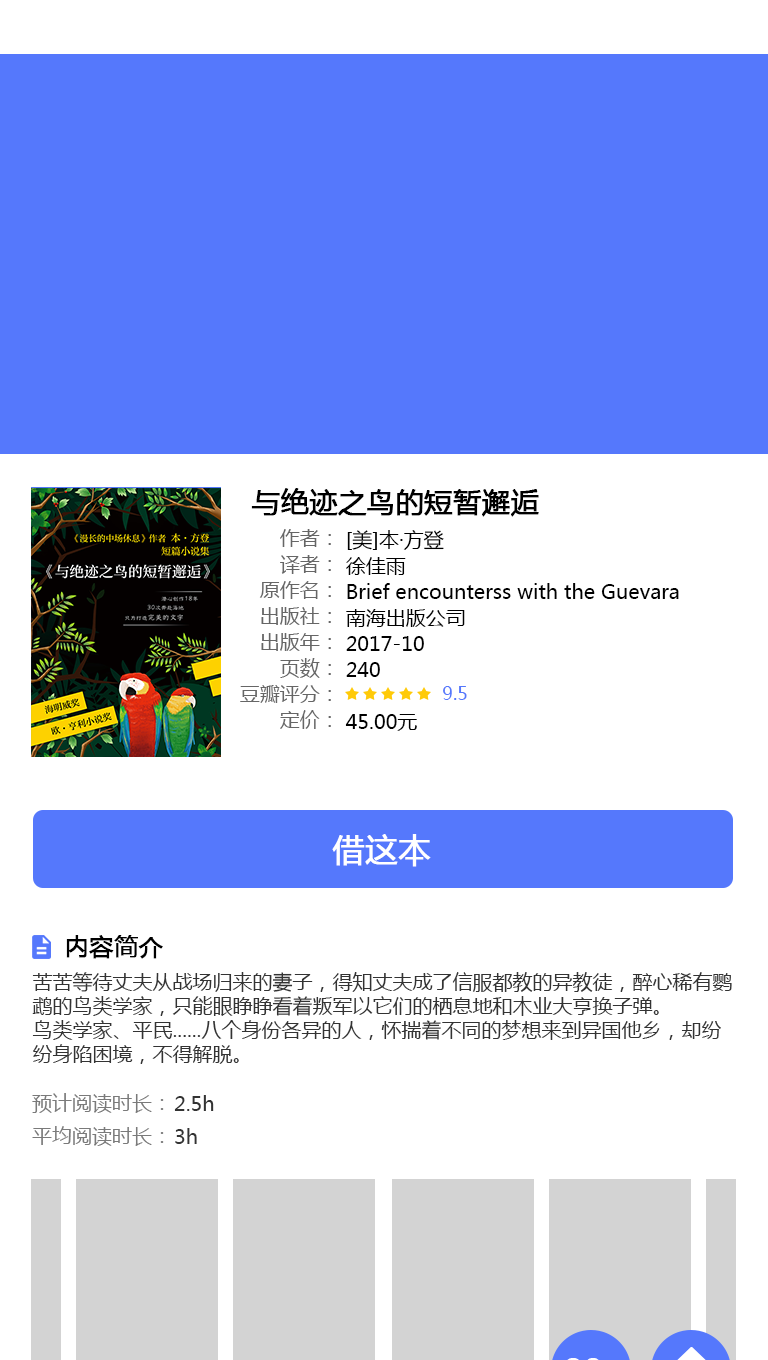
<style>
.page{position:relative;width:768px;height:1360px;background:#ffffff}
.page>*{position:absolute;margin:0}
.t1{font:28px "MicrosoftYaHei";color:#000000;font-weight:bold}
.t2{font:20px/26px "MicrosoftYaHei";color:#666666}
.t3{font:20px/26px "MicrosoftYaHei";color:#000000}
.t4{font:18px "MicrosoftYaHei";color:#5578fc}
.t5{font:32px "MicrosoftYaHei";color:#ffffff;font-weight:bold}
.t6{font:24px "MicrosoftYaHei";color:#000000;font-weight:bold}
.t7{font:20px/24px "MicrosoftYaHei";color:#333333}
.t8{font:20px "MicrosoftYaHei";color:#7a7a7a}
.t9{font:20px "MicrosoftYaHei";color:#333333}
</style>
<div class="page">
<p class="t1" style="left:251px;top:488px;width:288px;height:29px">与绝迹之鸟的短暂邂逅</p>
<p class="t2" style="left:240px;top:529px;width:91px;height:200px;text-align:right">作者：<br>译者：<br>原作名：<br>出版社：<br>出版年：<br>页数：<br>豆瓣评分：<br>定价：</p>
<p class="t3" style="left:345px;top:530px;width:334px;height:201px">[美]本·方登<br>徐佳雨<br>Brief encounterss with the Guevara <br>南海出版公司<br>2017-10<br>240<br><br>45.00元</p>
<p class="t4" style="left:443px;top:686px;width:24px;height:14px">9.5</p>
<p class="t5" style="left:332px;top:834px;width:99px;height:33px">借这本</p>
<p class="t6" style="left:66px;top:935px;width:97px;height:24px">内容简介</p>
<p class="t7" style="left:32px;top:972px;width:700px;height:92px">苦苦等待丈夫从战场归来的妻子，得知丈夫成了信服都教的异教徒，醉心稀有鹦鹉的鸟类学家，只能眼睁睁看着叛军以它们的栖息地和木业大亨换子弹。<br>鸟类学家、平民......八个身份各异的人，怀揣着不同的梦想来到异国他乡，却纷纷身陷困境，不得解脱。</p>
<p class="t8" style="left:32px;top:1093px;width:132px;height:20px">预计阅读时长：</p>
<p class="t9" style="left:174px;top:1095px;width:40px;height:16px">2.5h</p>
<p class="t8" style="left:32px;top:1126px;width:132px;height:20px">平均阅读时长：</p>
<p class="t9" style="left:175px;top:1128px;width:22px;height:16px">3h</p>
</div>
